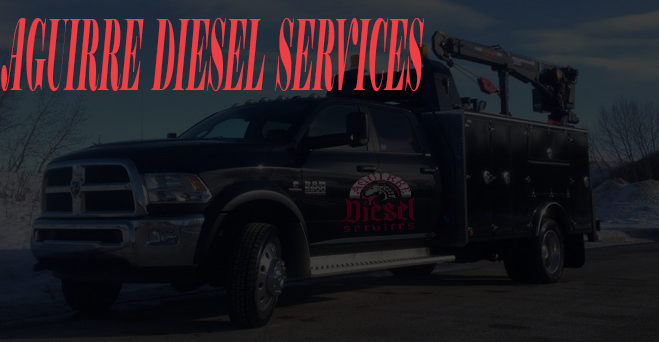
<style>
.page{position:relative;width:659px;height:342px}
.page>*{position:absolute;margin:0}
.t1{font:97.7px "Elephant-Italic";color:#ef3f45;scale:0.24 1}
</style>
<div class="page">
<p class="t1" style="left:1px;top:17px;width:423px;height:74px">AGUIRRE  DIESEL  SERVICES</p>
</div>
